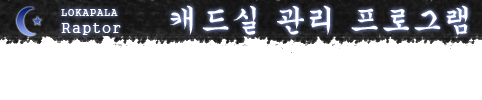
<style>
.page{position:relative;width:482px;height:100px;background:#ffffff}
.page>*{position:absolute;margin:0}
.t1{font:30px "Gungsuh";letter-spacing:0.05em;color:#ffffff}
.t2{font:10px "Gungsuh";letter-spacing:0.05em;color:#ffffff}
.t3{font:14px "Gungsuh";letter-spacing:0.1em;color:#ffffff}
</style>
<div class="page">
<p class="t1" style="left:170px;top:5px;width:298px;height:30px">캐드실 관리 프로그램</p>
<p class="t2" style="left:61px;top:9px;width:57px;height:7px">LOKAPALA</p>
<p class="t3" style="left:61px;top:23px;width:60px;height:12px">Raptor</p>
</div>
